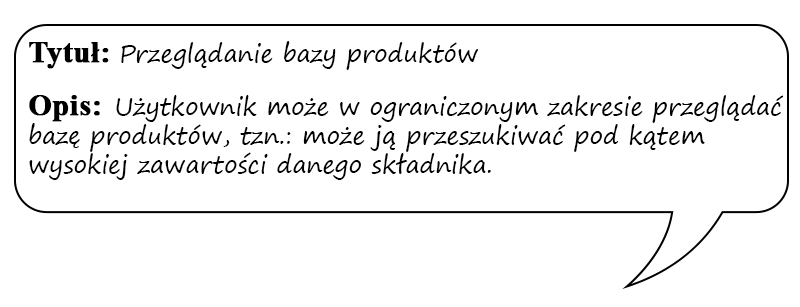
<style>
.page{position:relative;width:800px;height:307px;background:#ffffff}
.page>*{position:absolute;margin:0}
.t1{font:24px "SegoePrint";color:#000000}
.t2{font:30px "TimesNewRomanPS-BoldMT";color:#000000;font-weight:bold}
</style>
<div class="page">
<p class="t1" style="left:29px;top:41px;width:755px;height:139px"><span class="t2">Tytuł: </span>Przeglądanie bazy produktów<br><br><span class="t2">Opis:  </span>Użytkownik może w ograniczonym zakresie przeglądać bazę produktów, tzn.: może ją przeszukiwać pod kątem wysokiej zawartości danego składnika.</p>
</div>
